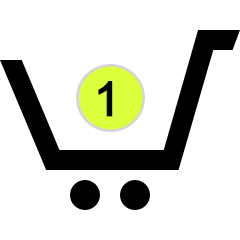
<style>
.page{position:relative;width:240px;height:240px;background:#ffffff}
.page>*{position:absolute;margin:0}
.t1{font:48px "ArialMT";color:#000000;font-weight:bold}
</style>
<div class="page">
<p class="t1" style="left:98px;top:81px;width:15px;height:36px">1</p>
</div>
